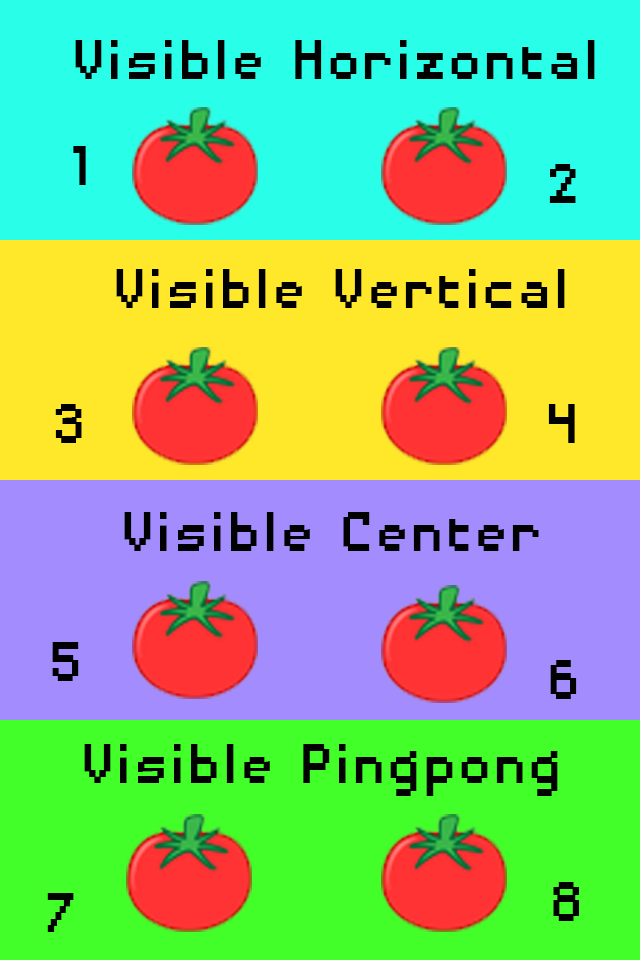
<style>
.page{position:relative;width:640px;height:960px;background:#29fee8}
.page>*{position:absolute;margin:0}
.t1{font:72.6px "DisposableDroidBB";color:#010101}
</style>
<div class="page">
<p class="t1" style="left:75px;top:40px;width:520px;height:39px">Visible Horizontal</p>
<p class="t1" style="left:73px;top:146px;width:13px;height:39px">1</p>
<p class="t1" style="left:549px;top:164px;width:27px;height:39px">2</p>
<p class="t1" style="left:116px;top:269px;width:449px;height:39px">Visible Vertical</p>
<p class="t1" style="left:55px;top:404px;width:27px;height:39px">3</p>
<p class="t1" style="left:548px;top:404px;width:27px;height:39px">4</p>
<p class="t1" style="left:124px;top:512px;width:415px;height:39px">Visible Center</p>
<p class="t1" style="left:52px;top:642px;width:27px;height:39px">5</p>
<p class="t1" style="left:550px;top:660px;width:27px;height:39px">6</p>
<p class="t1" style="left:84px;top:744px;width:474px;height:52px">Visible Pingpong</p>
<p class="t1" style="left:47px;top:893px;width:27px;height:39px">7</p>
<p class="t1" style="left:553px;top:882px;width:26px;height:39px">8</p>
</div>
